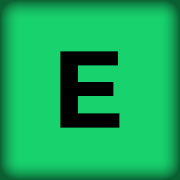
<style>
.page{position:relative;width:180px;height:180px;background:#18d26e}
.page>*{position:absolute;margin:0}
.t1{font:109px "Montserrat-Bold";color:#000000}
</style>
<div class="page">
<p class="t1" style="left:60px;top:51px;width:60px;height:77px">E</p>
</div>
